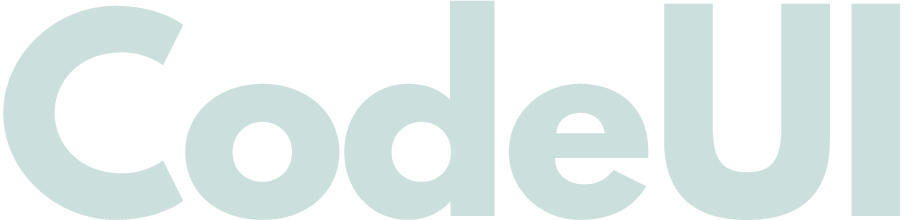
<style>
.page{position:relative;width:919px;height:220px;background:#cbe0dc}
.page>*{position:absolute;margin:0}
.t1{font:250px "LeagueSpartan-Bold";letter-spacing:-0.025em;color:#cbe0dc}
.t2{font:250px "LeagueSpartan-Bold";letter-spacing:-0.01em;color:#cbe0dc}
.t3{font:256.9px "LeagueSpartan-Bold";letter-spacing:-0.025em;color:#cbe0dc}
.t4{font:256.9px "LeagueSpartan-Bold";color:#cbe0dc}
</style>
<div class="page">
<p class="t1" style="left:3px;top:0px;width:897px;height:220px">Cod<span class="t2">e</span><span class="t3">U</span><span class="t4">I</span></p>
</div>
